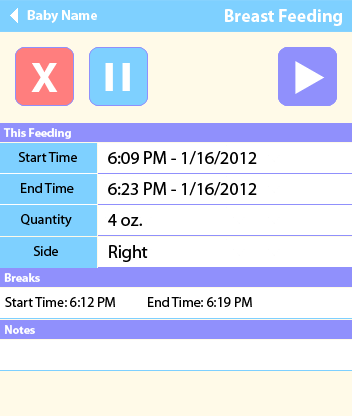
<style>
.page{position:relative;width:352px;height:416px;background:#ffffff}
.page>*{position:absolute;margin:0}
.t1{font:14px "MyriadPro-Bold";color:#ffffff}
.t2{font:18px "MyriadPro-Bold";color:#ffffff}
.t3{font:40px "Helvetica-Bold";color:#ffffff}
.t4{font:36px "Impact";color:#ffffff}
.t5{font:12px "MyriadPro-Bold";color:#ffffff}
.t6{font:14px "MyriadPro-Regular";color:#000000}
.t7{font:18px "MyriadPro-Regular";color:#000000}
</style>
<div class="page">
<p class="t1" style="left:27px;top:10px;width:70px;height:13px">Baby Name</p>
<p class="t2" style="left:225px;top:9px;width:117px;height:17px">Breast Feeding</p>
<p class="t3" style="left:31px;top:63px;width:27px;height:29px">X</p>
<p class="t4" style="left:105px;top:63px;width:25px;height:28px">I I</p>
<p class="t5" style="left:3px;top:128px;width:68px;height:11px">This Feeding</p>
<p class="t6" style="left:18px;top:152px;width:59px;height:10px">Start Time</p>
<p class="t7" style="left:108px;top:151px;width:149px;height:14px">6:09 PM - 1/16/2012</p>
<p class="t6" style="left:21px;top:183px;width:53px;height:10px">End Time</p>
<p class="t7" style="left:108px;top:182px;width:149px;height:14px">6:23 PM - 1/16/2012</p>
<p class="t6" style="left:21px;top:214px;width:51px;height:13px">Quantity</p>
<p class="t7" style="left:108px;top:214px;width:34px;height:12px">4 oz.</p>
<p class="t6" style="left:33px;top:246px;width:25px;height:10px">Side</p>
<p class="t7" style="left:109px;top:245px;width:39px;height:17px">Right</p>
<p class="t5" style="left:4px;top:273px;width:36px;height:9px">Breaks</p>
<p class="t6" style="left:5px;top:297px;width:110px;height:10px">Start Time: 6:12 PM</p>
<p class="t6" style="left:148px;top:297px;width:104px;height:10px">End Time: 6:19 PM</p>
<p class="t5" style="left:5px;top:325px;width:30px;height:9px">Notes</p>
</div>
